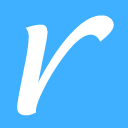
<style>
.page{position:relative;width:128px;height:128px;background:#3eb0ff}
.page>*{position:absolute;margin:0}
.t1{font:180px "LucidaHandwriting-Italic";color:#ffffff}
</style>
<div class="page">
<p class="t1" style="left:17px;top:15px;width:97px;height:101px">r</p>
</div>
